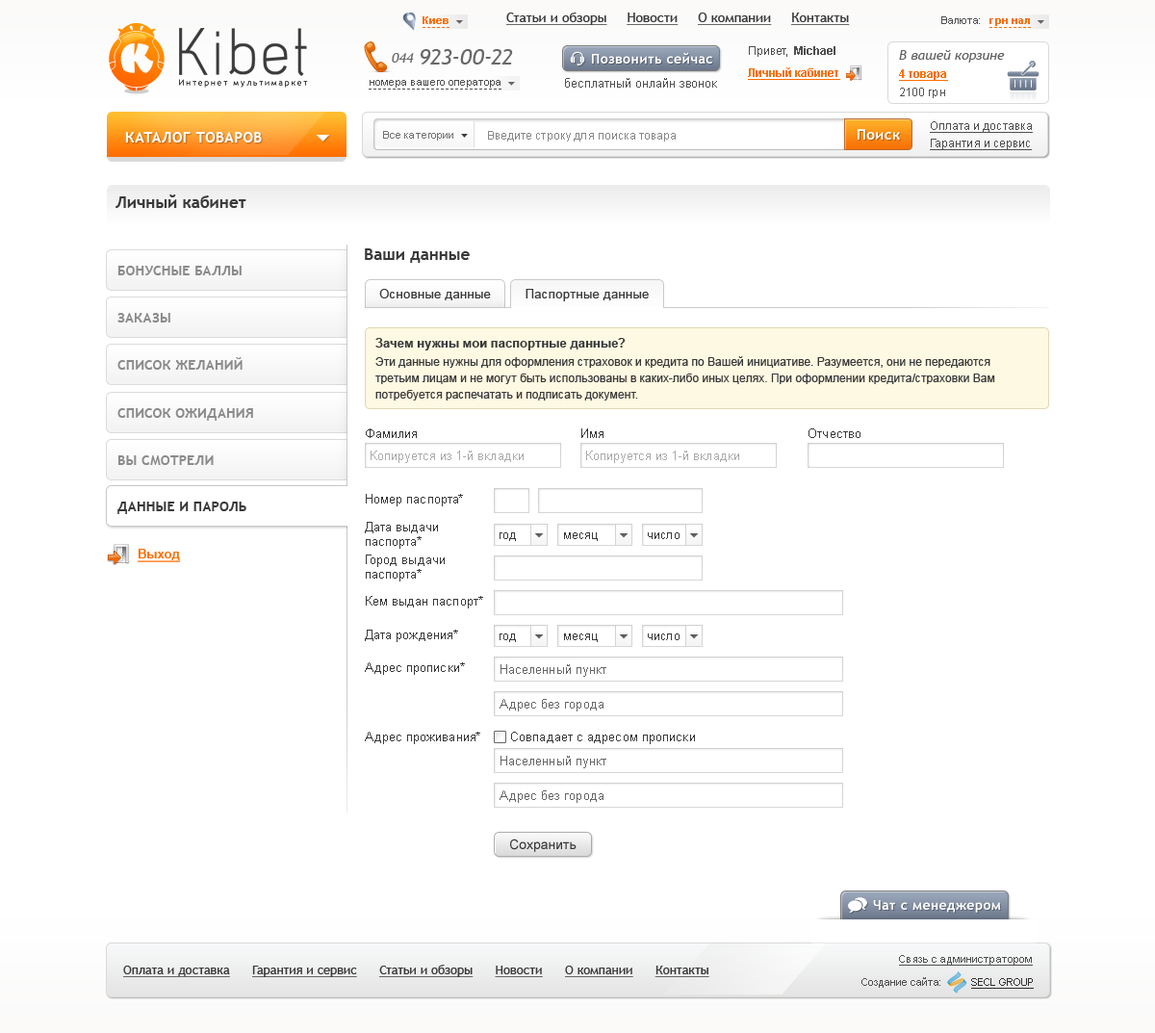
<style>
.page{position:relative;width:1155px;height:1033px;background:#ffffff}
.page>*{position:absolute;margin:0}
.t1{font:10.6px "Arial-BoldMT";color:#ff6e01}
.t2{font:13.5px "TrebuchetMS";color:#393939;text-decoration:underline}
.t3{font:10.6px "ArialMT";color:#4f4f4f}
.t4{font:84.2px "Acid";color:#3b3b3b}
.t5{font:13.5px "TrebuchetMS-Italic";color:#696969}
.t6{font:22.1px "TrebuchetMS-Italic";color:#696969}
.t7{font:13.5px "TrebuchetMS-Bold";letter-spacing:0.03em;color:#ffffff}
.t8{font:11.5px "ArialMT";color:#4f4f4f}
.t9{font:11.5px "Arial-BoldMT";color:#4f4f4f}
.t10{font:13.5px "TrebuchetMS-Italic";color:#616161}
.t11{font:12.5px "ArialMT";color:#4f4f4f}
.t12{font:11.5px "Arial-BoldMT";color:#ff6e01;text-decoration:underline}
.t13{font:8.5px "TrebuchetMS";letter-spacing:0.2em;color:#060606}
.t14{font:11.5px "ArialMT";color:#535353}
.t15{font:11.5px "ArialMT";color:#4f4f4f;text-decoration:underline}
.t16{font:14.4px "TrebuchetMS-Bold";letter-spacing:0.03em;color:#ffffff}
.t17{font:10.6px "ArialMT";color:#727272}
.t18{font:11.5px "ArialMT";color:#888888}
.t19{font:16.4px "TrebuchetMS-Bold";color:#393939}
.t20{font:13.5px "TrebuchetMS-Bold";letter-spacing:0.02em;color:#8b8b8b}
.t21{font:12.5px "ArialMT";letter-spacing:0.02em;color:#393939}
.t22{font:12.5px "Arial-BoldMT";color:#393939}
.t23{font:11.5px/16.4px "ArialMT";color:#393939}
.t24{font:12.5px "ArialMT";color:#393939}
.t25{font:12.5px "ArialMT";color:#aaaaaa}
.t26{font:13.5px "TrebuchetMS-Bold";letter-spacing:0.02em;color:#393939}
.t27{font:12.5px/14.4px "ArialMT";color:#393939}
.t28{font:11.5px "ArialMT";color:#393939}
.t29{font:12.5px "Arial-BoldMT";color:#ff6e01;text-decoration:underline}
.t30{font:12.5px "ArialMT";color:#666666}
.t31{font:13.5px "ArialMT";color:#393939}
.t32{font:12.5px "TrebuchetMS";color:#393939;text-decoration:underline}
.t33{font:10.6px "ArialMT";color:#4f4f4f;text-decoration:underline}
.t34{font:10.6px "ArialMT";color:#303030;text-decoration:underline}
</style>
<div class="page">
<p class="t1" style="left:422px;top:16px;width:26px;height:8px">Киев</p>
<p class="t2" style="left:506px;top:13px;width:344px;height:12px">Статьи и обзоры     Новости     О компании     Контакты</p>
<p class="t3" style="left:941px;top:16px;width:39px;height:8px">Валюта:</p>
<p class="t4" style="left:179px;top:28px;width:128px;height:48px">Kibet</p>
<p class="t1" style="left:989px;top:18px;width:41px;height:8px">грн нал</p>
<p class="t5" style="left:392px;top:53px;width:22px;height:10px">044</p>
<p class="t6" style="left:421px;top:49px;width:92px;height:15px">923-00-22</p>
<p class="t7" style="left:592px;top:52px;width:120px;height:12px">Позвонить сейчас</p>
<p class="t8" style="left:749px;top:46px;width:86px;height:11px">Привет,  <span class="t9">Michael</span></p>
<p class="t10" style="left:899px;top:50px;width:106px;height:13px">В вашей корзине</p>
<p class="t11" style="left:565px;top:78px;width:152px;height:10px">бесплатный онлайн звонок</p>
<p class="t12" style="left:748px;top:67px;width:92px;height:13px">Личный кабинет</p>
<p class="t12" style="left:899px;top:69px;width:49px;height:12px">4 товара</p>
<p class="t13" style="left:179px;top:79px;width:129px;height:9px">Интернет мультимаркет</p>
<p class="t3" style="left:370px;top:80px;width:130px;height:8px">номера вашего оператора</p>
<p class="t14" style="left:900px;top:88px;width:45px;height:10px">2100 грн</p>
<p class="t15" style="left:930px;top:121px;width:103px;height:12px">Оплата и доставка</p>
<p class="t16" style="left:125px;top:132px;width:137px;height:10px">КАТАЛОГ ТОВАРОВ</p>
<p class="t17" style="left:383px;top:131px;width:70px;height:10px">Все категории</p>
<p class="t18" style="left:488px;top:131px;width:188px;height:10px">Введите строку для поиска товара</p>
<p class="t16" style="left:857px;top:129px;width:43px;height:11px">Поиск</p>
<p class="t15" style="left:930px;top:139px;width:102px;height:11px">Гарантия и сервис</p>
<p class="t19" style="left:115px;top:194px;width:131px;height:14px">Личный кабинет</p>
<p class="t19" style="left:365px;top:248px;width:105px;height:15px">Ваши данные</p>
<p class="t20" style="left:117px;top:266px;width:125px;height:9px">БОНУСНЫЕ БАЛЛЫ</p>
<p class="t21" style="left:379px;top:289px;width:112px;height:11px">Основные данные</p>
<p class="t21" style="left:525px;top:289px;width:124px;height:12px">Паспортные данные</p>
<p class="t20" style="left:117px;top:313px;width:53px;height:9px">ЗАКАЗЫ</p>
<p class="t22" style="left:375px;top:338px;width:251px;height:12px">Зачем нужны мои паспортные данные?</p>
<p class="t20" style="left:117px;top:357px;width:126px;height:13px">СПИСОК ЖЕЛАНИЙ</p>
<p class="t23" style="left:375px;top:356px;width:620px;height:44px">Эти данные нужны для оформления страховок и кредита по Вашей инициативе. Разумеется, они не передаются третьим лицам и не могут быть использованы в каких-либо иных целях. При оформлении кредита/страховки Вам потребуется распечатать и подписать документ.</p>
<p class="t20" style="left:117px;top:408px;width:136px;height:13px">СПИСОК ОЖИДАНИЯ</p>
<p class="t24" style="left:366px;top:428px;width:51px;height:10px">Фамилия</p>
<p class="t24" style="left:581px;top:428px;width:22px;height:10px">Имя</p>
<p class="t24" style="left:808px;top:428px;width:52px;height:10px">Отчество</p>
<p class="t20" style="left:117px;top:455px;width:97px;height:10px">ВЫ СМОТРЕЛИ</p>
<p class="t25" style="left:370px;top:450px;width:154px;height:13px">Копируется из 1-й вкладки</p>
<p class="t25" style="left:586px;top:450px;width:153px;height:13px">Копируется из 1-й вкладки</p>
<p class="t24" style="left:366px;top:494px;width:97px;height:12px">Номер паспорта*</p>
<p class="t26" style="left:117px;top:501px;width:129px;height:13px">ДАННЫЕ И ПАРОЛЬ</p>
<p class="t27" style="left:365px;top:522px;width:73px;height:27px">Дата выдачи<br>паспорта*</p>
<p class="t28" style="left:499px;top:532px;width:17px;height:9px">год</p>
<p class="t28" style="left:564px;top:532px;width:34px;height:9px">месяц</p>
<p class="t28" style="left:648px;top:532px;width:31px;height:7px">число</p>
<p class="t29" style="left:138px;top:549px;width:42px;height:13px">Выход</p>
<p class="t27" style="left:366px;top:554px;width:79px;height:27px">Город выдачи<br>паспорта*</p>
<p class="t24" style="left:366px;top:596px;width:117px;height:12px">Кем выдан паспорт*</p>
<p class="t24" style="left:365px;top:629px;width:93px;height:13px">Дата рождения*</p>
<p class="t28" style="left:499px;top:633px;width:17px;height:9px">год</p>
<p class="t28" style="left:564px;top:633px;width:34px;height:9px">месяц</p>
<p class="t28" style="left:648px;top:633px;width:31px;height:7px">число</p>
<p class="t24" style="left:365px;top:662px;width:100px;height:13px">Адрес прописки*</p>
<p class="t30" style="left:500px;top:664px;width:106px;height:13px">Населенный пункт</p>
<p class="t30" style="left:499px;top:699px;width:104px;height:12px">Адрес без города</p>
<p class="t24" style="left:365px;top:731px;width:115px;height:13px">Адрес проживания*</p>
<p class="t24" style="left:511px;top:731px;width:184px;height:13px">Совпадает с адресом прописки</p>
<p class="t30" style="left:500px;top:755px;width:106px;height:13px">Населенный пункт</p>
<p class="t30" style="left:499px;top:790px;width:104px;height:13px">Адрес без города</p>
<p class="t31" style="left:510px;top:838px;width:66px;height:14px">Сохранить</p>
<p class="t7" style="left:873px;top:900px;width:128px;height:12px">Чат с менеджером</p>
<p class="t32" style="left:123px;top:964px;width:586px;height:13px">Оплата и доставка      Гарантия и сервис      Статьи и обзоры      Новости      О компании      Контакты</p>
<p class="t33" style="left:899px;top:955px;width:134px;height:10px">Связь с администратором</p>
<p class="t3" style="left:861px;top:977px;width:79px;height:10px">Создание сайта:</p>
<p class="t34" style="left:971px;top:978px;width:63px;height:10px">SECL GROUP</p>
</div>
